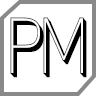
<style>
.page{position:relative;width:96px;height:96px;background:#ffffff}
.page>*{position:absolute;margin:0}
.t1{font:76.1px "Lane-Posh";letter-spacing:-0.05em;color:#000000;scale:0.83 1}
</style>
<div class="page">
<p class="t1" style="left:10px;top:17px;width:77px;height:61px">PM</p>
</div>
